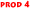
<style>
.page{position:relative;width:30px;height:10px;background:#ffffff}
.page>*{position:absolute;margin:0}
.t1{font:8.5px "LithosPro-Black";color:#ff0000;scale:0.87 1}
</style>
<div class="page">
<p class="t1" style="left:0px;top:0px;width:30px;height:8px">prod 4</p>
</div>
